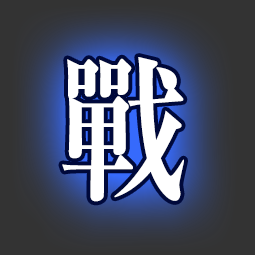
<style>
.page{position:relative;width:255px;height:255px;background:#333333}
.page>*{position:absolute;margin:0}
.t1{font:156px "RyuminPro-ExBold";letter-spacing:-0.08em;color:#ffffff;scale:0.83 1}
</style>
<div class="page">
<p class="t1" style="left:62px;top:57px;width:122px;height:145px">戰</p>
</div>
